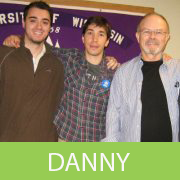
<style>
.page{position:relative;width:180px;height:180px}
.page>*{position:absolute;margin:0}
.t1{font:26.7px "MyriadPro-Regular";color:#faf7f7}
</style>
<div class="page">
<p class="t1" style="left:49px;top:153px;width:81px;height:18px">DANNY</p>
</div>
